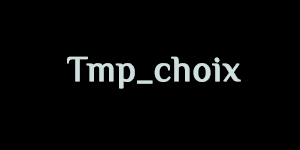
<style>
.page{position:relative;width:300px;height:150px;background:#000000}
.page>*{position:absolute;margin:0}
.t1{font:36px "Philosopher";letter-spacing:0.005em;color:#cfdfde;font-weight:bold}
</style>
<div class="page">
<p class="t1" style="left:67px;top:56px;width:174px;height:33px">Tmp_choix</p>
</div>
